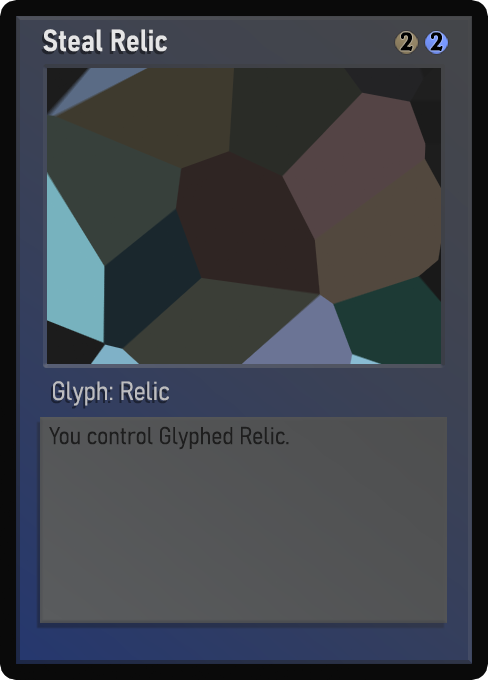
<style>
.page{position:relative;width:488px;height:680px}
.page>*{position:absolute;margin:0}
.t1{font:30px "Bahnschrift-SemiBoldSemiCondensed";color:#f2f2f2;font-weight:bold}
.t2{font:25px "WTRRoycroft";color:#000000;font-weight:bold;scale:1.09 1}
.t3{font:26px "Bahnschrift-LightSemiCondensed";color:#c8c8c8;font-weight:bold}
.t4{font:24px "Bahnschrift-LightSemiCondensed";color:#1e1e1e;font-weight:bold}
</style>
<div class="page">
<p class="t1" style="left:43px;top:29px;width:124px;height:23px;opacity:0.9">Steal Relic</p>
<p class="t2" style="left:400px;top:32px;width:13px;height:19px">2</p>
<p class="t2" style="left:430px;top:32px;width:13px;height:19px">2</p>
<p class="t3" style="left:53px;top:381px;width:116px;height:25px;opacity:0.9">Glyph: Relic</p>
<p class="t4" style="left:49px;top:426px;width:240px;height:24px">You control Glyphed Relic.</p>
</div>
